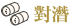
<style>
.page{position:relative;width:69px;height:27px;background:#ffffff}
.page>*{position:absolute;margin:0}
.t1{font:18px "RyuminPr6N-ExBold";color:#ae9442}
</style>
<div class="page">
<p class="t1" style="left:34px;top:5px;width:35px;height:18px">對潛</p>
</div>
